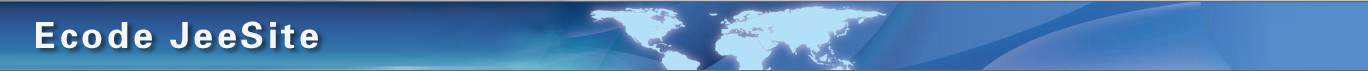
<style>
.page{position:relative;width:1368px;height:71px}
.page>*{position:absolute;margin:0}
.t1{font:36px "FZZYJW--GB1-0";letter-spacing:0.1em;color:#f6f6f6}
</style>
<div class="page">
<p class="t1" style="left:36px;top:21px;width:282px;height:28px">Ecode JeeSite</p>
</div>
